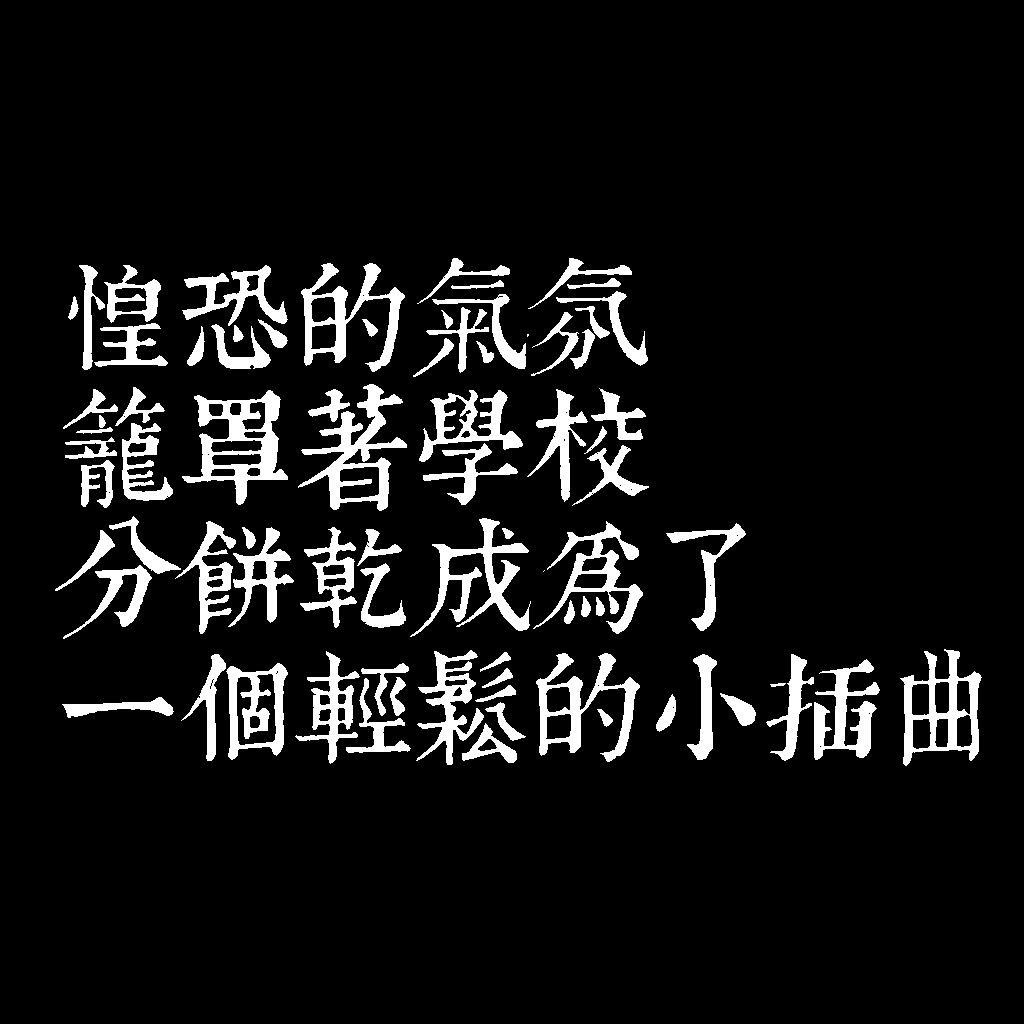
<style>
.page{position:relative;width:1024px;height:1024px;background:#000000}
.page>*{position:absolute;margin:0}
.t1{font:120px/130px "TpldKhangXiDictTrial";letter-spacing:-0.02em;color:#ffffff}
</style>
<div class="page">
<p class="t1" style="left:55px;top:258px;width:927px;height:508px">惶恐的氣氛<br>籠罩著學校<br>分餅乾成為了<br>一個輕鬆的小插曲</p>
</div>
